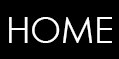
<style>
.page{position:relative;width:119px;height:59px;background:#000000}
.page>*{position:absolute;margin:0}
.t1{font:36px "CenturyGothic";color:#ffffff}
</style>
<div class="page">
<p class="t1" style="left:9px;top:17px;width:103px;height:26px">HOME</p>
</div>
